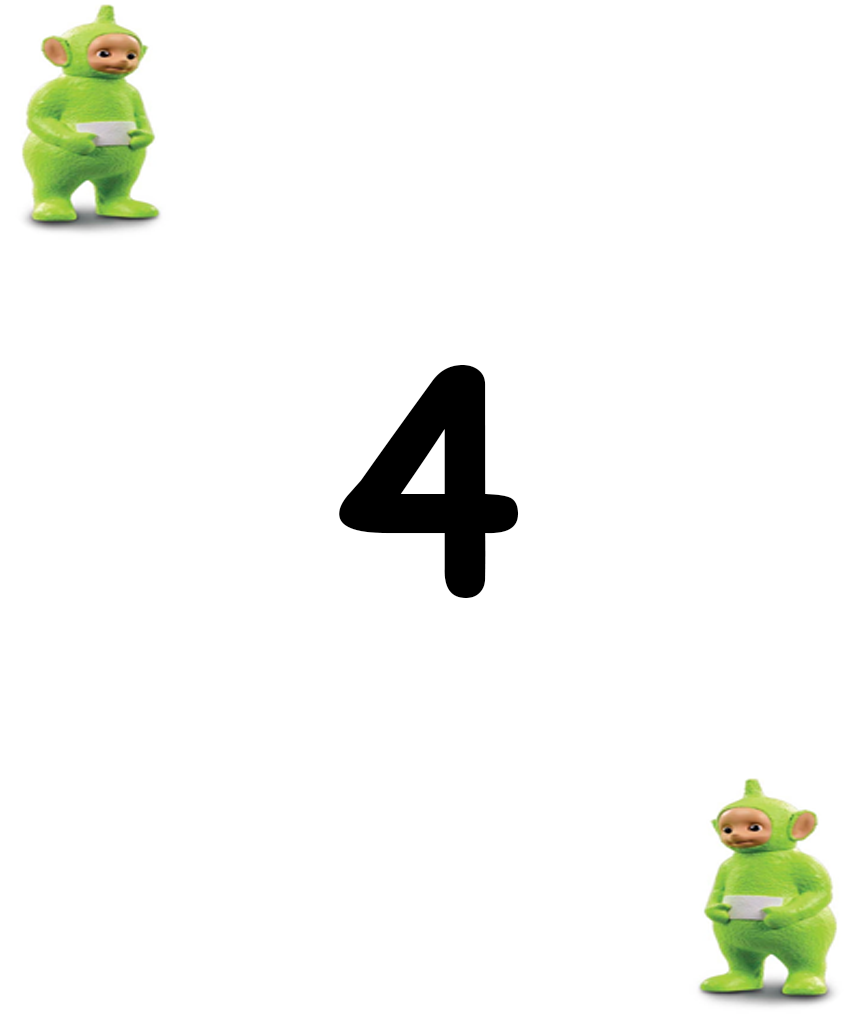
<style>
.page{position:relative;width:859px;height:1020px;background:#ffffff}
.page>*{position:absolute;margin:0}
.t1{font:300px "ComicSansMS-Bold";color:#000000;font-variant:small-caps}
</style>
<div class="page">
<p class="t1" style="left:339px;top:365px;width:180px;height:233px">4</p>
</div>
